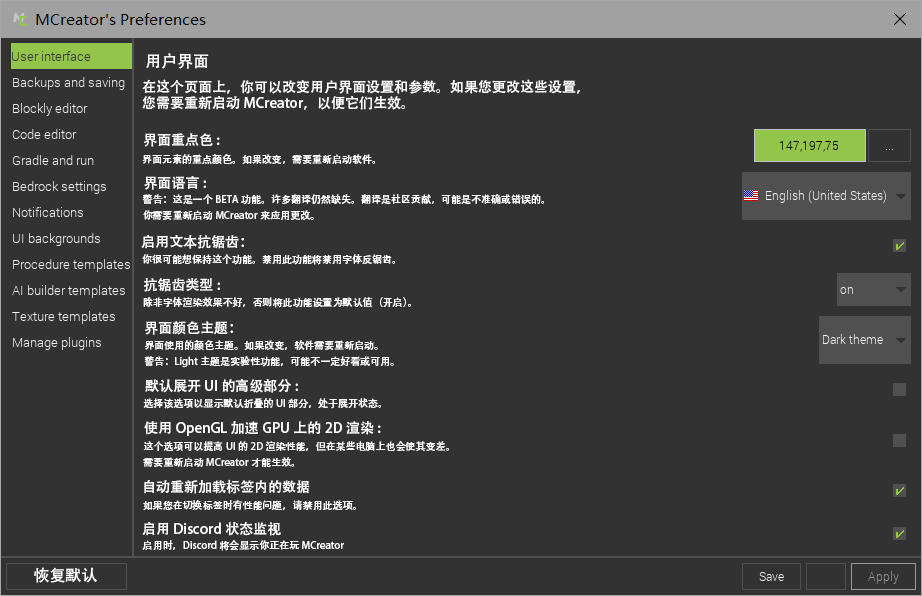
<style>
.page{position:relative;width:922px;height:596px;background:#323232}
.page>*{position:absolute;margin:0}
.t1{font:16px "AdobeHeitiStd-Regular";color:#ffffff}
.t2{font:14px/16px "AdobeHeitiStd-Regular";color:#ffffff}
.t3{font:14px "AdobeHeitiStd-Regular";color:#ffffff}
.t4{font:10px "AdobeHeitiStd-Regular";color:#ffffff}
.t5{font:10px/16px "AdobeHeitiStd-Regular";color:#ffffff}
</style>
<div class="page">
<p class="t1" style="left:146px;top:53px;width:63px;height:16px">用户界面</p>
<p class="t2" style="left:142px;top:79px;width:438px;height:31px">在这个页面上，你可以改变用户界面设置和参数。如果您更改这些设置，<br>您需要重新启动MCreator，以便它们生效。</p>
<p class="t3" style="left:144px;top:133px;width:76px;height:14px">界面重点色:</p>
<p class="t4" style="left:142px;top:154px;width:233px;height:10px">界面元素的重点颜色。如果改变，需要重新启动软件。</p>
<p class="t3" style="left:144px;top:176px;width:62px;height:14px">界面语言:</p>
<p class="t5" style="left:142px;top:194px;width:402px;height:26px">警告：这是一个BETA功能。许多翻译仍然缺失。翻译是社区贡献，可能是不准确或错误的。<br>你需要重新启动MCreator来应用更改。</p>
<p class="t3" style="left:141px;top:235px;width:103px;height:14px">启用文本抗锯齿：</p>
<p class="t4" style="left:142px;top:254px;width:253px;height:11px">你很可能想保持这个功能。禁用此功能将禁用字体反锯齿。</p>
<p class="t3" style="left:144px;top:278px;width:76px;height:14px">抗锯齿类型:</p>
<p class="t4" style="left:143px;top:297px;width:268px;height:11px">除非字体渲染效果不好，否则将此功能设置为默认值（开启）。</p>
<p class="t3" style="left:145px;top:321px;width:88px;height:14px">界面颜色主题：</p>
<p class="t5" style="left:144px;top:340px;width:250px;height:28px">界面使用的颜色主题。如果改变，软件需要重新启动。<br>警告：Light主题是实验性功能，可能不一定好看或可用。</p>
<p class="t3" style="left:145px;top:379px;width:153px;height:14px">默认展开UI的高级部分:</p>
<p class="t4" style="left:143px;top:398px;width:238px;height:11px">选择该选项以显示默认折叠的UI部分，处于展开状态。</p>
<p class="t3" style="left:144px;top:421px;width:237px;height:15px">使用OpenGL加速GPU上的2D渲染:</p>
<p class="t5" style="left:143px;top:441px;width:306px;height:26px">这个选项可以提高UI的2D渲染性能，但在某些电脑上也会使其变差。<br>需要重新启动MCreator才能生效。</p>
<p class="t3" style="left:144px;top:479px;width:166px;height:15px">自动重新加载标签内的数据</p>
<p class="t4" style="left:143px;top:500px;width:213px;height:10px">如果您在切换标签时有性能问题，请禁用此选项。</p>
<p class="t3" style="left:142px;top:522px;width:139px;height:14px">启用Discord状态监视</p>
<p class="t4" style="left:142px;top:540px;width:202px;height:11px">启用时，Discord 将会显示你正在玩 MCreator</p>
<p class="t1" style="left:34px;top:567px;width:63px;height:16px">恢复默认</p>
</div>
